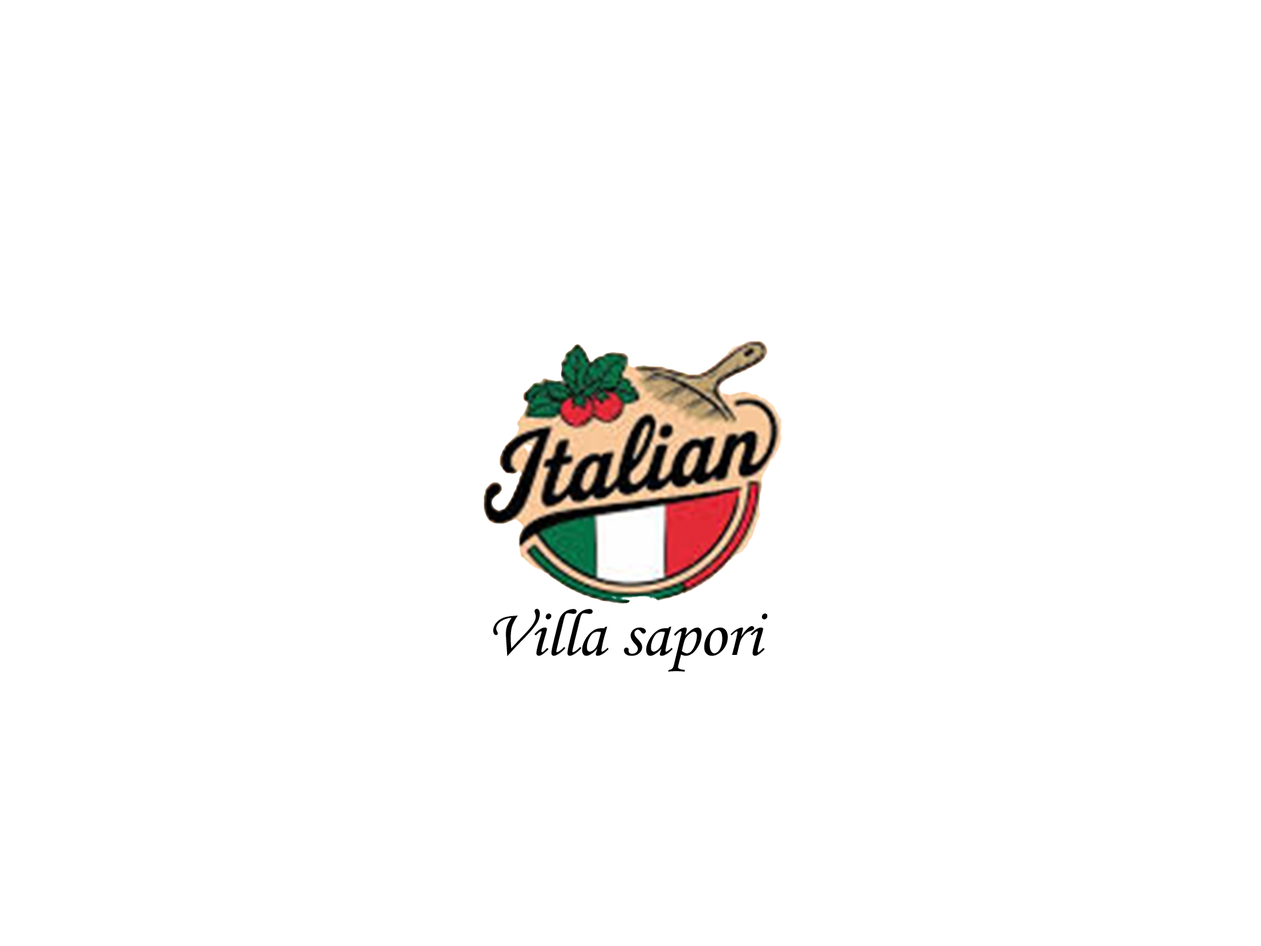
<style>
.page{position:relative;width:1261px;height:946px;background:#ffffff}
.page>*{position:absolute;margin:0}
.t1{font:66.7px "MonotypeCorsiva";color:#000000}
</style>
<div class="page">
<p class="t1" style="left:493px;top:609px;width:274px;height:62px">Villa sapori</p>
</div>
